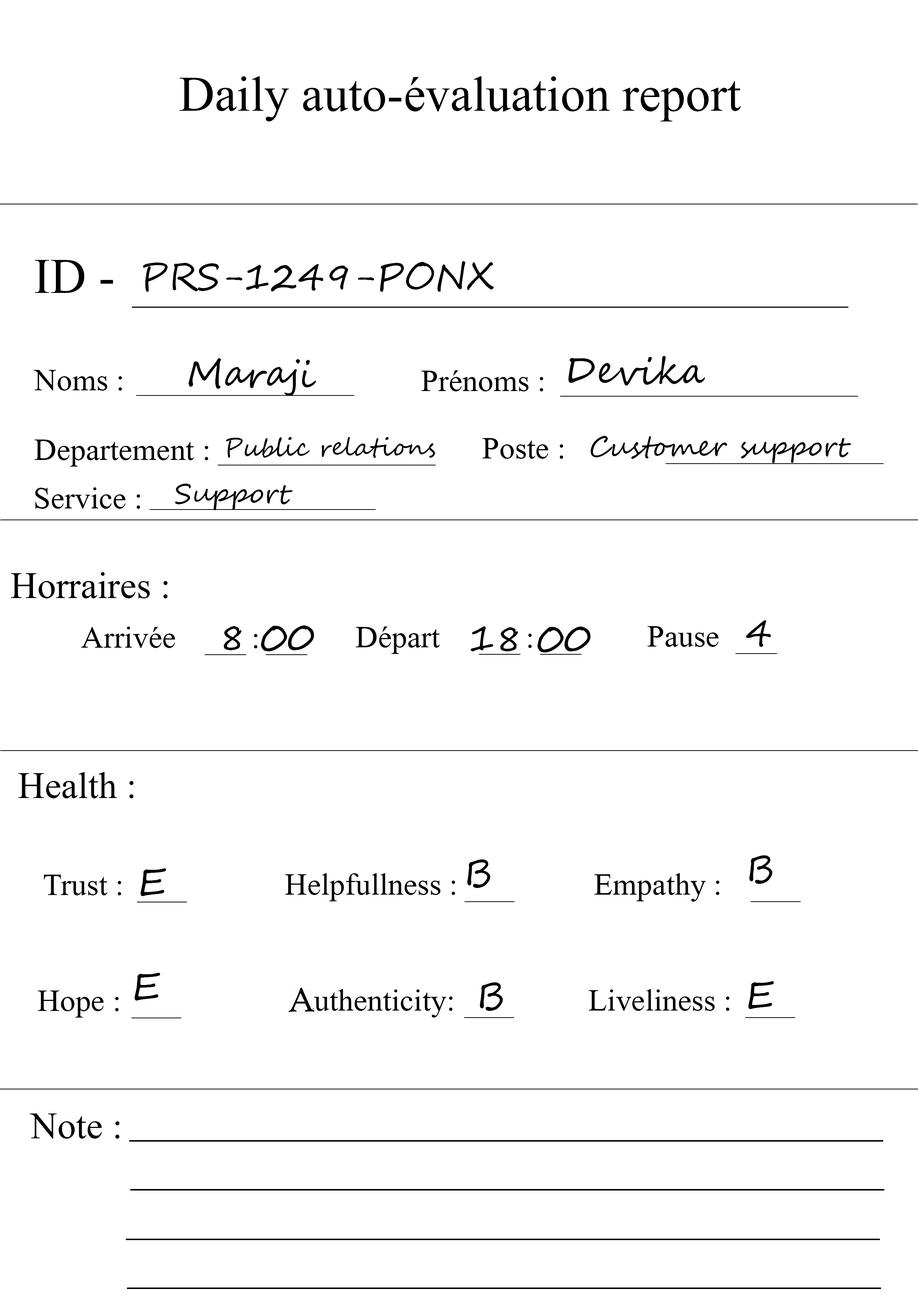
<style>
.page{position:relative;width:918px;height:1299px;background:#ffffff}
.page>*{position:absolute;margin:0}
.t1{font:74px "Microsoft-Himalaya";color:#000000}
.t2{font:37px "SegoeScript";color:#000000}
.t3{font:46.3px "Microsoft-Himalaya";color:#000000}
.t4{font:24.7px "SegoeScript";color:#000000}
.t5{font:27.8px "SegoeScript";color:#000000}
.t6{font:55.5px "Microsoft-Himalaya";color:#000000}
.t7{font:37px "HighTowerText-Reg";color:#000000}
</style>
<div class="page">
<p class="t1" style="left:180px;top:76px;width:561px;height:45px">Daily auto-évaluation report</p>
<p class="t1" style="left:35px;top:260px;width:78px;height:33px">ID -</p>
<p class="t2" style="left:143px;top:261px;width:351px;height:31px">PRS-1249-PONX</p>
<p class="t2" style="left:188px;top:358px;width:128px;height:38px">Maraji</p>
<p class="t2" style="left:568px;top:356px;width:137px;height:29px">Devika</p>
<p class="t3" style="left:34px;top:370px;width:88px;height:21px">Noms :</p>
<p class="t3" style="left:421px;top:370px;width:122px;height:21px">Prénoms :</p>
<p class="t4" style="left:226px;top:437px;width:209px;height:21px">Public relations</p>
<p class="t3" style="left:482px;top:438px;width:81px;height:21px">Poste :</p>
<p class="t5" style="left:591px;top:436px;width:261px;height:27px">Customer support</p>
<p class="t3" style="left:34px;top:439px;width:174px;height:27px">Departement :</p>
<p class="t5" style="left:175px;top:484px;width:118px;height:26px">Support</p>
<p class="t3" style="left:35px;top:487px;width:105px;height:22px">Service :</p>
<p class="t6" style="left:11px;top:572px;width:157px;height:26px">Horraires :</p>
<p class="t3" style="left:81px;top:626px;width:94px;height:22px">Arrivée</p>
<p class="t2" style="left:224px;top:625px;width:90px;height:26px">8 00</p>
<p class="t3" style="left:356px;top:626px;width:84px;height:28px">Départ</p>
<p class="t2" style="left:471px;top:626px;width:120px;height:26px">18 00</p>
<p class="t3" style="left:648px;top:626px;width:71px;height:21px">Pause</p>
<p class="t2" style="left:746px;top:620px;width:25px;height:27px">4</p>
<p class="t3" style="left:254px;top:634px;width:4px;height:14px">:</p>
<p class="t3" style="left:528px;top:633px;width:4px;height:15px">:</p>
<p class="t6" style="left:18px;top:772px;width:116px;height:26px">Health :</p>
<p class="t2" style="left:749px;top:855px;width:24px;height:29px">B</p>
<p class="t2" style="left:140px;top:868px;width:26px;height:28px">E</p>
<p class="t2" style="left:467px;top:859px;width:24px;height:29px">B</p>
<p class="t3" style="left:44px;top:874px;width:77px;height:21px">Trust :</p>
<p class="t3" style="left:285px;top:873px;width:170px;height:28px">Helpfullness :</p>
<p class="t3" style="left:594px;top:873px;width:126px;height:28px">Empathy :</p>
<p class="t2" style="left:134px;top:973px;width:26px;height:27px">E</p>
<p class="t7" style="left:288px;top:987px;width:27px;height:25px">A</p>
<p class="t3" style="left:301px;top:989px;width:152px;height:28px">authenticity:</p>
<p class="t2" style="left:480px;top:982px;width:23px;height:29px">B</p>
<p class="t3" style="left:589px;top:989px;width:141px;height:22px">Liveliness :</p>
<p class="t2" style="left:748px;top:981px;width:26px;height:28px">E</p>
<p class="t3" style="left:38px;top:990px;width:81px;height:27px">Hope :</p>
<p class="t6" style="left:30px;top:1113px;width:90px;height:25px">Note :</p>
</div>
